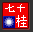
<style>
.page{position:relative;width:33px;height:32px;background:#f20000}
.page>*{position:absolute;margin:0}
.t1{font:10.4px "SimSun";color:#ffffff}
.t2{font:11.7px "SimSun";color:#ffffff}
</style>
<div class="page">
<p class="t1" style="left:5px;top:4px;width:20px;height:8px">七十</p>
<p class="t2" style="left:16px;top:15px;width:11px;height:12px">桂</p>
</div>
